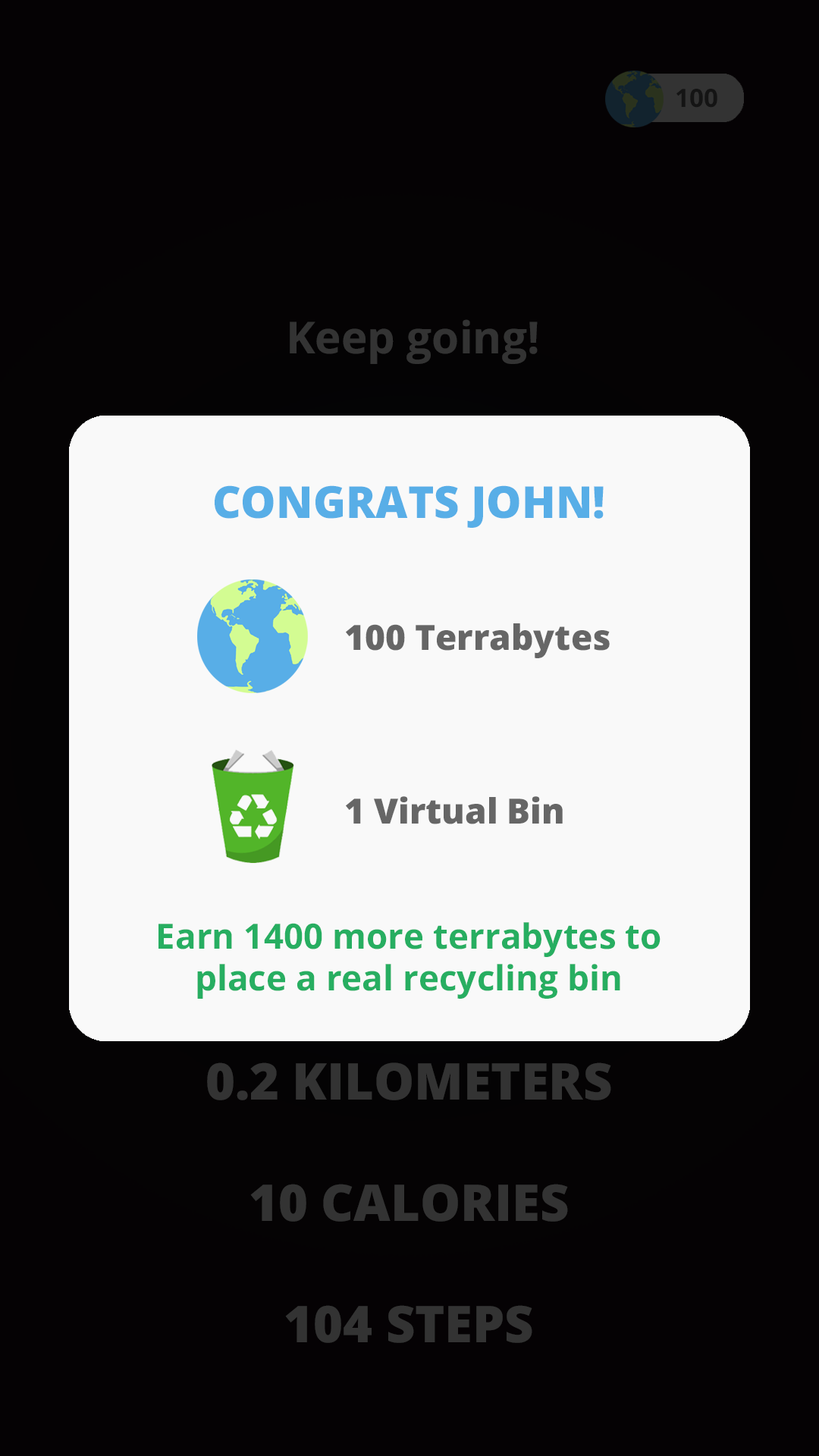
<style>
.page{position:relative;width:819px;height:1456px;background:#050204}
.page>*{position:absolute;margin:0}
.t1{font:25.3px "OpenSans-Bold";color:#141414}
.t2{font:44.2px "OpenSans-Bold";color:#333333}
.t3{font:44.2px "OpenSans-Extrabold";color:#58aee7}
.t4{font:34.9px "OpenSans-Extrabold";color:#666666}
.t5{font:34.8px "OpenSans-Bold";color:#27ae61}
.t6{font:50.6px "OpenSans-Extrabold";color:#333333}
</style>
<div class="page">
<p class="t1" style="left:676px;top:89px;width:41px;height:19px">100</p>
<p class="t2" style="left:290px;top:319px;width:248px;height:45px">Keep going!</p>
<p class="t3" style="left:215px;top:485px;width:389px;height:43px">CONGRATS JOHN!</p>
<p class="t4" style="left:346px;top:623px;width:264px;height:35px">100 Terrabytes</p>
<p class="t4" style="left:346px;top:796px;width:217px;height:28px">1 Virtual Bin</p>
<p class="t5" style="left:158px;top:922px;width:502px;height:77px;text-align:center">Earn 1400 more terrabytes to <br>place a real recycling bin</p>
<p class="t6" style="left:207px;top:1062px;width:404px;height:281px;text-align:center">0.2 KILOMETERS<br><br>10 CALORIES<br><br>104 STEPS</p>
</div>
